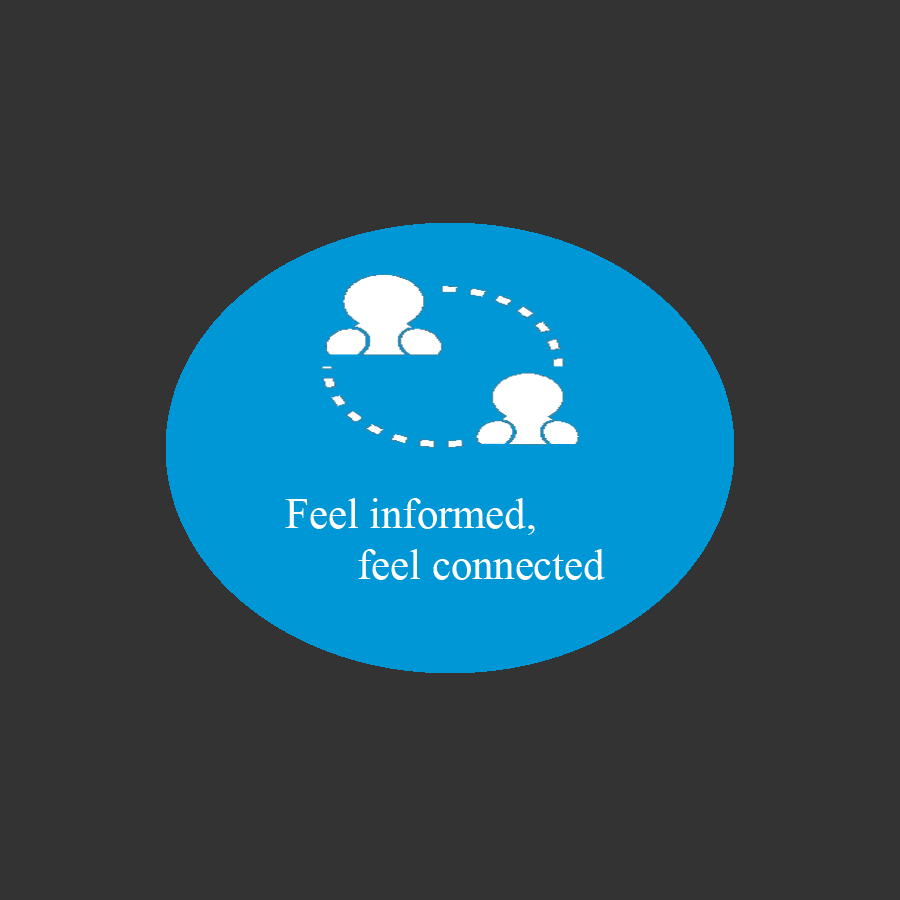
<style>
.page{position:relative;width:900px;height:900px;background:#333333}
.page>*{position:absolute;margin:0}
.t1{font:42.7px "TimesNewRomanPSMT";color:#ffffff}
</style>
<div class="page">
<p class="t1" style="left:285px;top:498px;width:320px;height:82px">Feel informed, <br>   feel connected</p>
</div>
